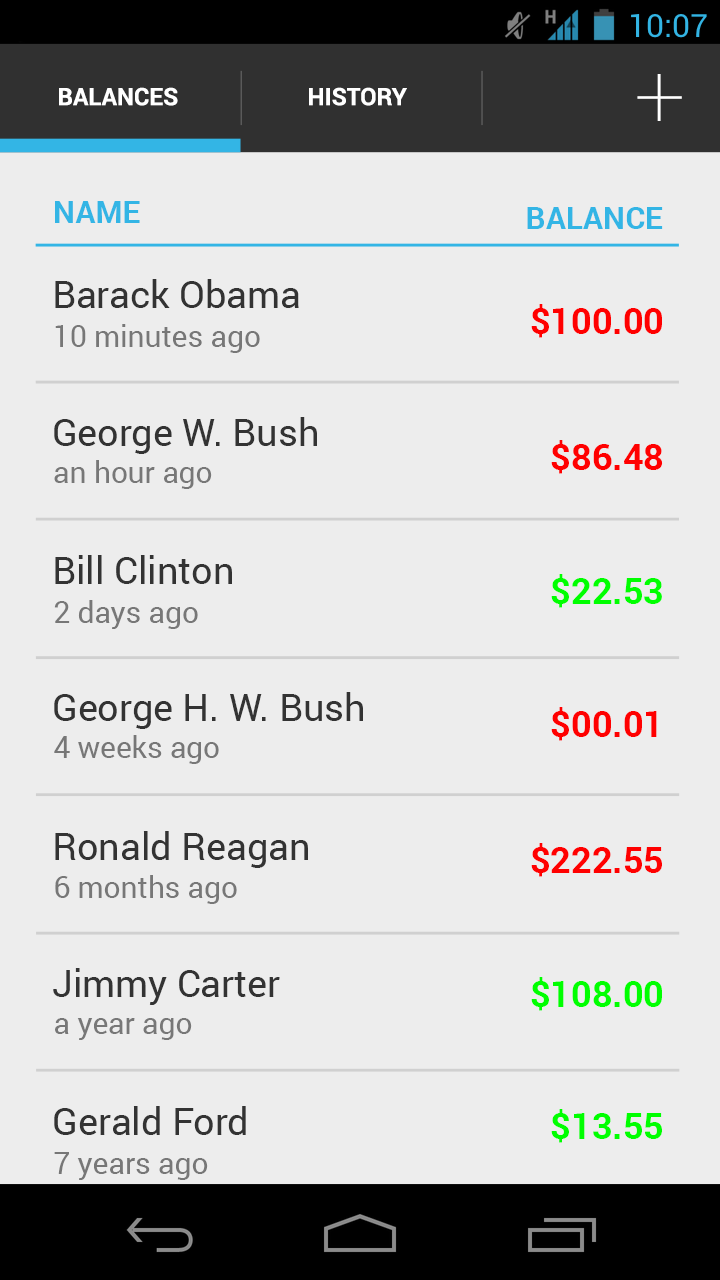
<style>
.page{position:relative;width:720px;height:1280px;background:#ededed}
.page>*{position:absolute;margin:0}
.t1{font:90px "Roboto-Thin";color:#ffffff}
.t2{font:24px "Roboto-Bold";color:#ffffff}
.t3{font:31.3px "Roboto-Bold";color:#33b5e5}
.t4{font:37.7px "Roboto-Regular";color:#333333}
.t5{font:36px "Roboto-Bold";color:#ff0000}
.t6{font:29.8px "Roboto-Regular";color:#777777}
.t7{font:36px "Roboto-Bold";color:#00ff00}
</style>
<div class="page">
<p class="t1" style="left:637px;top:74px;width:45px;height:47px">+</p>
<p class="t2" style="left:59px;top:87px;width:119px;height:19px">BALANCES</p>
<p class="t2" style="left:309px;top:87px;width:98px;height:19px">HISTORY</p>
<p class="t3" style="left:55px;top:201px;width:85px;height:22px">NAME</p>
<p class="t3" style="left:527px;top:207px;width:136px;height:22px">BALANCE</p>
<p class="t4" style="left:55px;top:279px;width:244px;height:29px">Barack Obama</p>
<p class="t5" style="left:531px;top:304px;width:131px;height:34px">$100.00</p>
<p class="t6" style="left:55px;top:324px;width:205px;height:29px">10 minutes ago</p>
<p class="t4" style="left:54px;top:417px;width:263px;height:37px">George W. Bush</p>
<p class="t5" style="left:551px;top:440px;width:112px;height:34px">$86.48</p>
<p class="t6" style="left:54px;top:460px;width:158px;height:29px">an hour ago</p>
<p class="t4" style="left:55px;top:555px;width:177px;height:29px">Bill Clinton</p>
<p class="t7" style="left:551px;top:574px;width:111px;height:34px">$22.53</p>
<p class="t6" style="left:54px;top:600px;width:144px;height:29px">2 days ago</p>
<p class="t4" style="left:54px;top:692px;width:309px;height:37px">George H. W. Bush</p>
<p class="t5" style="left:551px;top:707px;width:106px;height:34px">$00.01</p>
<p class="t6" style="left:54px;top:735px;width:165px;height:29px">4 weeks ago</p>
<p class="t4" style="left:55px;top:831px;width:253px;height:37px">Ronald Reagan</p>
<p class="t5" style="left:531px;top:843px;width:131px;height:34px">$222.55</p>
<p class="t6" style="left:55px;top:875px;width:182px;height:29px">6 months ago</p>
<p class="t4" style="left:53px;top:968px;width:227px;height:37px">Jimmy Carter</p>
<p class="t7" style="left:531px;top:977px;width:131px;height:34px">$108.00</p>
<p class="t6" style="left:55px;top:1018px;width:137px;height:22px">a year ago</p>
<p class="t4" style="left:54px;top:1106px;width:192px;height:29px">Gerald Ford</p>
<p class="t7" style="left:551px;top:1109px;width:111px;height:34px">$13.55</p>
<p class="t6" style="left:54px;top:1152px;width:154px;height:28px">7 years ago</p>
</div>
